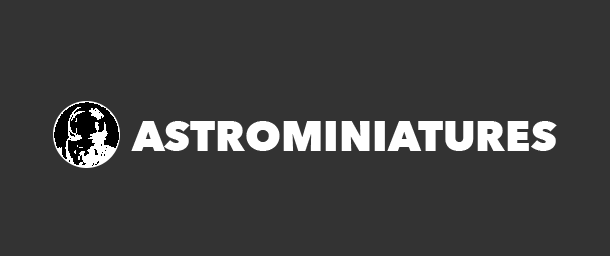
<style>
.page{position:relative;width:610px;height:256px;background:#333333}
.page>*{position:absolute;margin:0}
.t1{font:42px "AvenirNext-Heavy";color:#ffffff}
</style>
<div class="page">
<p class="t1" style="left:131px;top:121px;width:426px;height:30px">ASTROMINIATURES</p>
</div>
